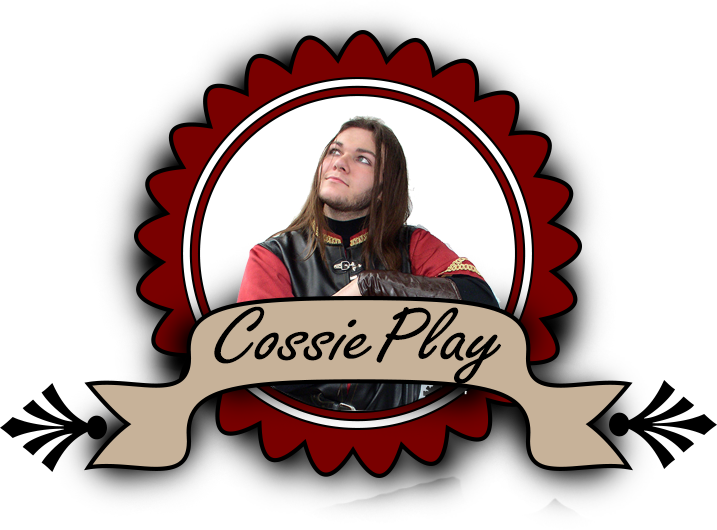
<style>
.page{position:relative;width:717px;height:530px;background:#ffffff}
.page>*{position:absolute;margin:0}
.t1{font:82.8px "FreestyleScript-Regular";color:#000000;scale:1.24 1}
</style>
<div class="page">
<p class="t1" style="left:214px;top:306px;width:287px;height:78px">CossiePlay</p>
</div>
